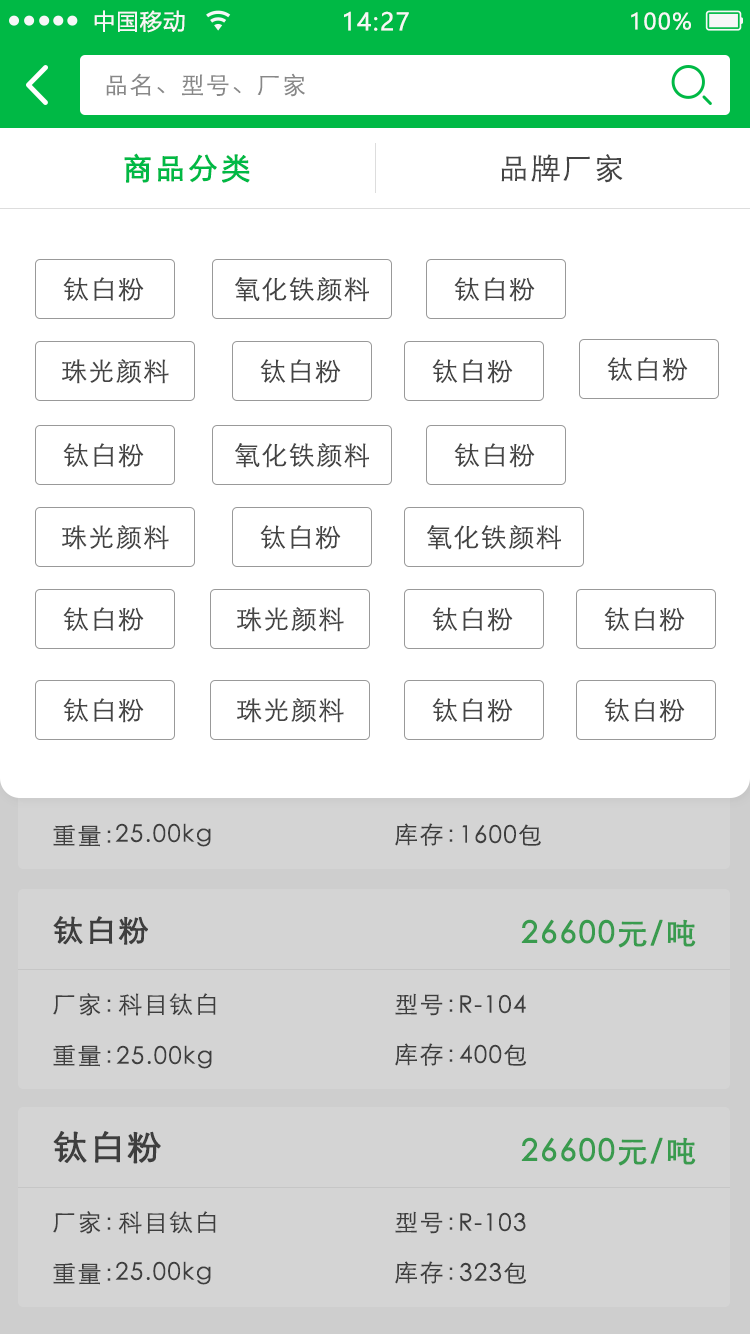
<style>
.page{position:relative;width:750px;height:1334px;background:#ffffff}
.page>*{position:absolute;margin:0}
.t1{font:22px "MicrosoftYaHei";letter-spacing:0.06em;color:#f7f7f7}
.t2{font:24px "MicrosoftYaHei";letter-spacing:0.06em;color:#f7f7f7}
.t3{font:24px "STXihei";letter-spacing:0.06em;color:#888888}
.t4{font:30px "STXihei";letter-spacing:0.06em;color:#00b945;font-weight:bold}
.t5{font:30px "STXihei";letter-spacing:0.06em;color:#444444}
.t6{font:25.9px "STXihei";letter-spacing:0.06em;color:#444444}
.t7{font:24px "STXihei";letter-spacing:0.06em;color:#444444}
.t8{font:30px "STXihei";letter-spacing:0.06em;color:#444444;font-weight:bold}
.t9{font:30px "STXihei";letter-spacing:0.06em;color:#399b4e;font-weight:bold}
.t10{font:34px "STXihei";letter-spacing:0.06em;color:#444444;font-weight:bold}
</style>
<div class="page">
<p class="t1" style="left:94px;top:10px;width:91px;height:23px">中国移动</p>
<p class="t2" style="left:344px;top:11px;width:65px;height:20px">14:27</p>
<p class="t1" style="left:631px;top:12px;width:60px;height:18px">100%</p>
<p class="t3" style="left:106px;top:73px;width:199px;height:24px">品名、型号、厂家</p>
<p class="t4" style="left:124px;top:153px;width:126px;height:30px">商品分类</p>
<p class="t5" style="left:501px;top:154px;width:122px;height:29px">品牌厂家</p>
<p class="t6" style="left:63px;top:277px;width:81px;height:25px">钛白粉</p>
<p class="t6" style="left:235px;top:277px;width:134px;height:25px">氧化铁颜料</p>
<p class="t6" style="left:454px;top:277px;width:81px;height:25px">钛白粉</p>
<p class="t6" style="left:62px;top:359px;width:107px;height:25px">珠光颜料</p>
<p class="t6" style="left:260px;top:359px;width:81px;height:25px">钛白粉</p>
<p class="t6" style="left:432px;top:359px;width:81px;height:25px">钛白粉</p>
<p class="t6" style="left:607px;top:357px;width:81px;height:25px">钛白粉</p>
<p class="t6" style="left:63px;top:443px;width:81px;height:25px">钛白粉</p>
<p class="t6" style="left:235px;top:443px;width:134px;height:25px">氧化铁颜料</p>
<p class="t6" style="left:454px;top:443px;width:81px;height:25px">钛白粉</p>
<p class="t6" style="left:62px;top:525px;width:107px;height:25px">珠光颜料</p>
<p class="t6" style="left:260px;top:525px;width:81px;height:25px">钛白粉</p>
<p class="t6" style="left:427px;top:525px;width:134px;height:25px">氧化铁颜料</p>
<p class="t6" style="left:63px;top:607px;width:81px;height:25px">钛白粉</p>
<p class="t6" style="left:237px;top:607px;width:107px;height:25px">珠光颜料</p>
<p class="t6" style="left:432px;top:607px;width:81px;height:25px">钛白粉</p>
<p class="t6" style="left:604px;top:607px;width:81px;height:25px">钛白粉</p>
<p class="t6" style="left:63px;top:698px;width:81px;height:25px">钛白粉</p>
<p class="t6" style="left:237px;top:698px;width:107px;height:25px">珠光颜料</p>
<p class="t6" style="left:432px;top:698px;width:81px;height:25px">钛白粉</p>
<p class="t6" style="left:604px;top:698px;width:81px;height:25px">钛白粉</p>
<p class="t7" style="left:53px;top:825px;width:58px;height:22px">重量：</p>
<p class="t7" style="left:115px;top:823px;width:96px;height:24px">25.00kg</p>
<p class="t7" style="left:395px;top:823px;width:58px;height:23px">库存：</p>
<p class="t7" style="left:462px;top:824px;width:79px;height:22px">1600包</p>
<p class="t8" style="left:53px;top:916px;width:95px;height:29px">钛白粉</p>
<p class="t9" style="left:521px;top:919px;width:175px;height:29px">26600元/吨</p>
<p class="t7" style="left:53px;top:993px;width:58px;height:23px">厂家：</p>
<p class="t7" style="left:118px;top:993px;width:98px;height:23px">科目钛白</p>
<p class="t7" style="left:395px;top:993px;width:58px;height:23px">型号：</p>
<p class="t7" style="left:460px;top:994px;width:66px;height:20px">R-104</p>
<p class="t7" style="left:53px;top:1045px;width:58px;height:22px">重量：</p>
<p class="t7" style="left:116px;top:1045px;width:96px;height:24px">25.00kg</p>
<p class="t7" style="left:395px;top:1043px;width:58px;height:23px">库存：</p>
<p class="t7" style="left:459px;top:1044px;width:68px;height:22px">400包</p>
<p class="t10" style="left:53px;top:1131px;width:108px;height:33px">钛白粉</p>
<p class="t9" style="left:521px;top:1137px;width:175px;height:29px">26600元/吨</p>
<p class="t7" style="left:53px;top:1211px;width:58px;height:23px">厂家：</p>
<p class="t7" style="left:118px;top:1211px;width:98px;height:23px">科目钛白</p>
<p class="t7" style="left:395px;top:1211px;width:58px;height:23px">型号：</p>
<p class="t7" style="left:460px;top:1212px;width:66px;height:20px">R-103</p>
<p class="t7" style="left:53px;top:1263px;width:58px;height:22px">重量：</p>
<p class="t7" style="left:115px;top:1261px;width:96px;height:24px">25.00kg</p>
<p class="t7" style="left:395px;top:1261px;width:58px;height:23px">库存：</p>
<p class="t7" style="left:459px;top:1262px;width:68px;height:22px">323包</p>
</div>
